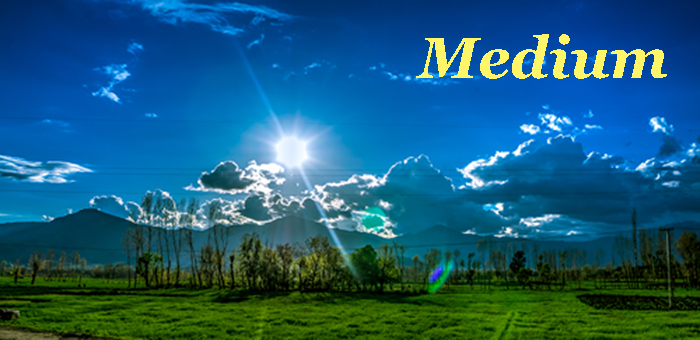
<style>
.page{position:relative;width:700px;height:340px}
.page>*{position:absolute;margin:0}
.t1{font:58.3px "Georgia-BoldItalic";color:#fff568}
</style>
<div class="page">
<p class="t1" style="left:416px;top:34px;width:251px;height:45px">Medium</p>
</div>
